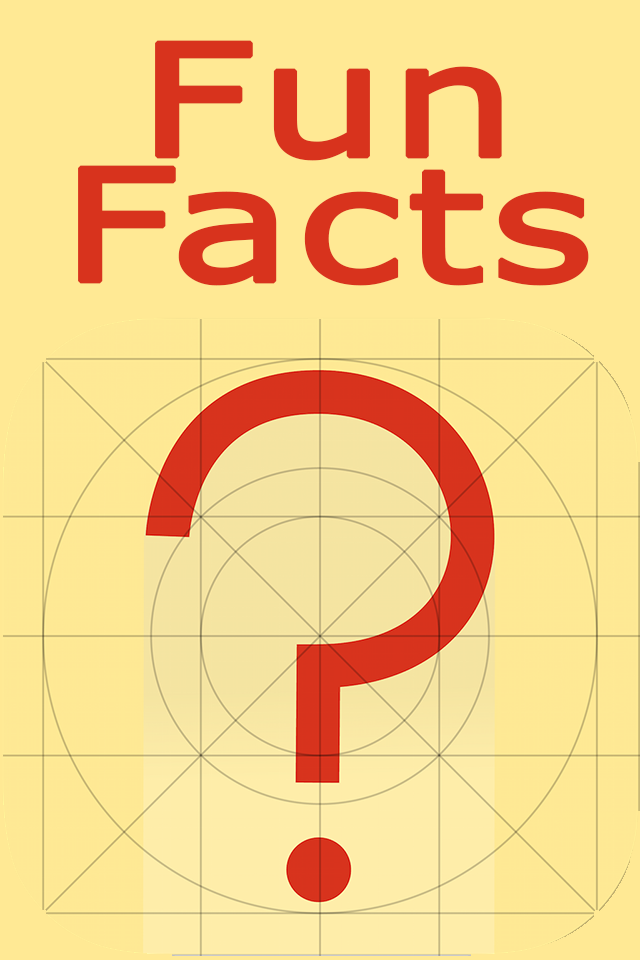
<style>
.page{position:relative;width:640px;height:960px;background:#ffe994}
.page>*{position:absolute;margin:0}
.t1{font:156px/125px "MSReferenceSansSerif";color:#d8331d;font-weight:bold;scale:1.28 1}
</style>
<div class="page">
<p class="t1" style="left:78px;top:40px;width:511px;height:246px;text-align:center">Fun<br>Facts</p>
</div>
